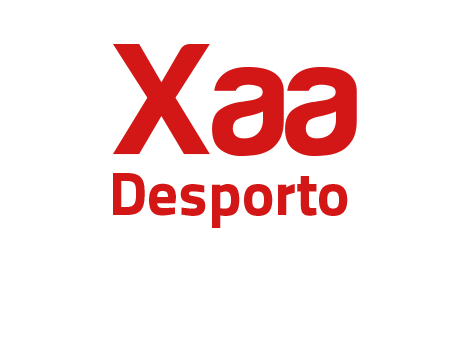
<style>
.page{position:relative;width:454px;height:340px;background:#ffffff}
.page>*{position:absolute;margin:0}
.t1{font:163px "Harabara-Bold";color:#d31717}
.t2{font:80px "Harabara-Bold";color:#d31717}
.t3{font:61px "TitilliumText22L-999wt";color:#d31717}
</style>
<div class="page">
<p class="t1" style="left:113px;top:44px;width:244px;height:112px"><span class="t2">  </span>   Xaa</p>
<p class="t3" style="left:113px;top:173px;width:235px;height:55px">Desporto</p>
</div>
